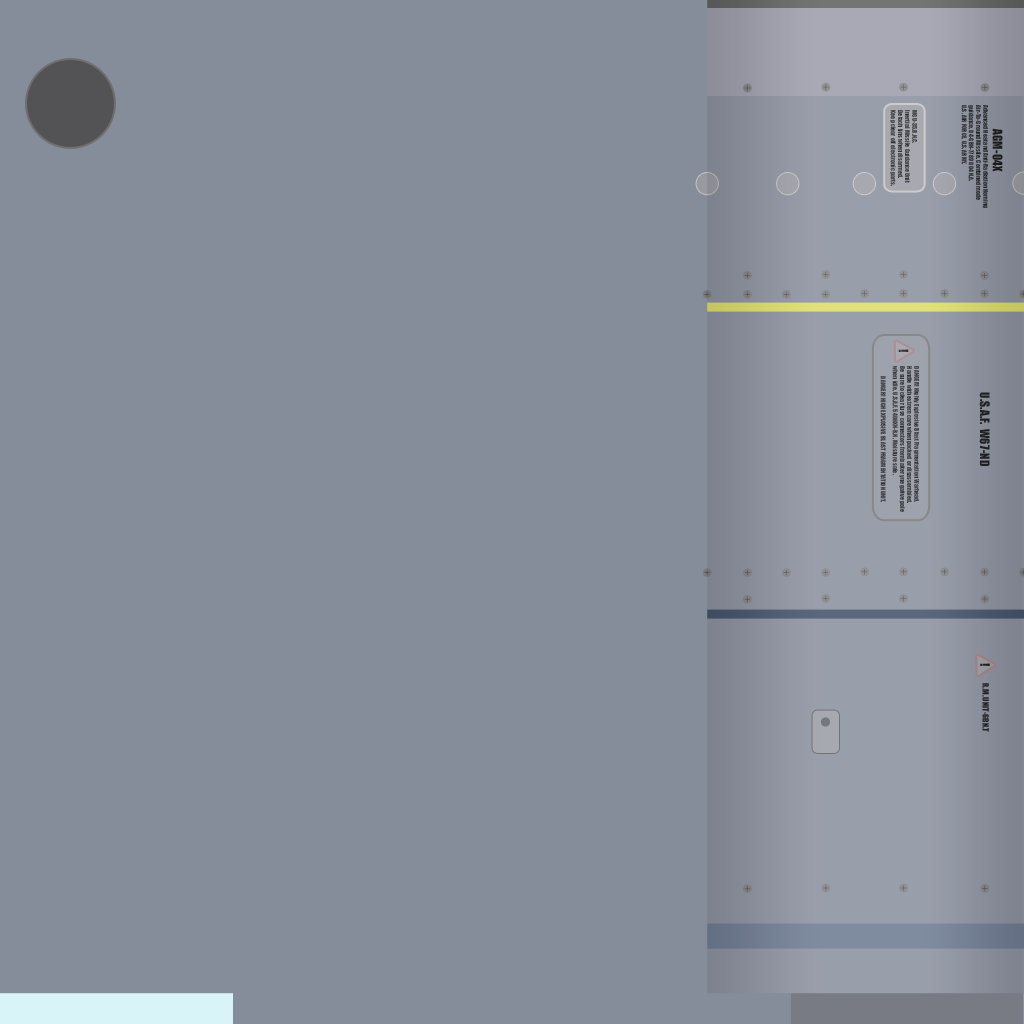
<style>
.page{position:relative;width:1024px;height:1024px;background:#858c9a}
.page>*{position:absolute;margin:0}
.t1{font:6px "Impact";color:#323233}
.t2{font:6px "Impact";color:#232324}
.t3{font:12px "Impact";color:#1c1c1d}
.t4{font:12px "Impact";color:#323233}
.t5{font:12px "Impact";color:#212021}
.t6{font:12px "Impact";color:#202021}
.t7{font:8px "Impact";color:#202021}
</style>
<div class="page">
<p class="t1" style="left:890px;top:110px;width:27px;height:76px;rotate:90deg">MGU-35.B.N.C. <br>Inertial Missile Guidance Unit <br>Detach fins when disarmed. <br>Keep clear off electronic parts.</p>
<p class="t2" style="left:961px;top:105px;width:27px;height:103px;rotate:90deg">Advanced Heat and Anti-Radiation Homing <br>Air-To-Ground Missile. Combined mode <br>guidance. 04-GBN-7789 004 N.A. <br>U.S. AIR FORCE. U.S. ARMY.</p>
<p class="t3" style="left:992px;top:128px;width:11px;height:44px;rotate:90deg">AGM-04X</p>
<p class="t4" style="left:898px;top:349px;width:11px;height:3px;rotate:90deg">!</p>
<p class="t1" style="left:892px;top:366px;width:27px;height:146px;rotate:90deg">DANGER! Highly Explosive Blast Fragmentation Warhead.<br>Handle with extrem care when packed or disassembled.<br>Be sure to clear fuse connectors from battery negative pole<br>when idle. U.S.A.F. 5406XN-B.N. Moisture safe.</p>
<p class="t1" style="left:880px;top:376px;width:6px;height:126px;rotate:90deg">DANGER! HIGH EXPLOSIVE BLAST FRAGMENTATION UNIT.</p>
<p class="t5" style="left:979px;top:392px;width:11px;height:74px;rotate:90deg">U.S.A.F.  W67-ND</p>
<p class="t6" style="left:980px;top:663px;width:10px;height:3px;rotate:90deg">!</p>
<p class="t7" style="left:982px;top:683px;width:7px;height:49px;rotate:90deg">R.M. UNIT-6BN.T</p>
</div>
